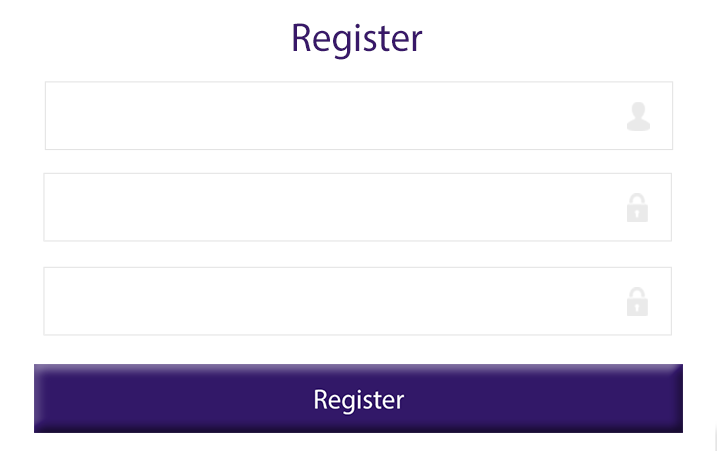
<style>
.page{position:relative;width:717px;height:451px;background:#ffffff}
.page>*{position:absolute;margin:0}
.t1{font:40.6px "MyriadPro-Regular";color:#381868;scale:0.97 1}
</style>
<div class="page">
<p class="t1" style="left:293px;top:23px;width:130px;height:37px">Register</p>
</div>
